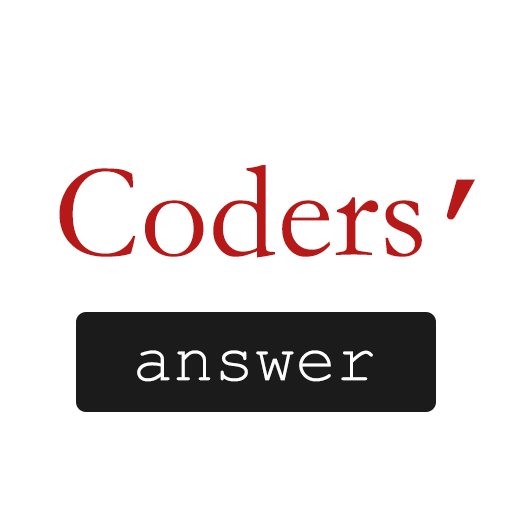
<style>
.page{position:relative;width:512px;height:512px;background:#ffffff}
.page>*{position:absolute;margin:0}
.t1{font:135.5px "STFangsong";color:#b71818}
.t2{font:135.5px "CourierNewPSMT";color:#b71818}
.t3{font:67.7px "CourierNewPSMT";color:#ffffff}
</style>
<div class="page">
<p class="t1" style="left:59px;top:165px;width:416px;height:93px">Coders<span class="t2">’</span></p>
<p class="t3" style="left:137px;top:350px;width:236px;height:32px">answer</p>
</div>
